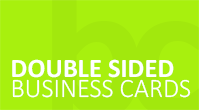
<style>
.page{position:relative;width:199px;height:110px;background:#a8f00e}
.page>*{position:absolute;margin:0}
.t1{font:26.6px "Calibri-Bold";color:#ffffff}
.t2{font:26.6px "Calibri-Light";color:#ffffff}
</style>
<div class="page">
<p class="t1" style="left:12px;top:59px;width:162px;height:19px">DOUBLE SIDED</p>
<p class="t2" style="left:12px;top:79px;width:179px;height:19px">BUSINESS CARDS</p>
</div>
